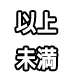
<style>
.page{position:relative;width:60px;height:72px;background:#ffffff}
.page>*{position:absolute;margin:0}
.t1{font:24.2px "NicoKaku";color:#ffffff;scale:0.86 1}
</style>
<div class="page">
<p class="t1" style="left:16px;top:12px;width:41px;height:22px">以上</p>
<p class="t1" style="left:16px;top:47px;width:41px;height:23px">未満</p>
</div>
